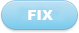
<style>
.page{position:relative;width:79px;height:33px}
.page>*{position:absolute;margin:0}
.t1{font:14px "Arial-Black";color:#ffffff}
</style>
<div class="page">
<p class="t1" style="left:28px;top:10px;width:25px;height:10px">FIX</p>
</div>
